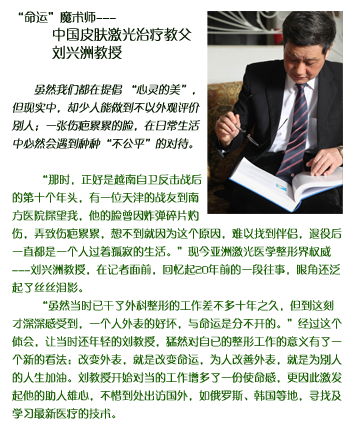
<style>
.page{position:relative;width:357px;height:447px;background:#ffffff}
.page>*{position:absolute;margin:0}
.t1{font:11px/18px "FZZQJW--GB1-0";color:#196003}
.t2{font:12px/18px "FZZQJW--GB1-0";color:#061b00}
.t3{font:14px/18px "FZZQJW--GB1-0";color:#061b00}
.t4{font:11px/18px "FZZQJW--GB1-0";color:#061b00;font-style:italic}
</style>
<div class="page">
<p class="t1" style="left:11px;top:11px;width:331px;height:408px"><span class="t2">“命运”魔术师---<br></span><span class="t3">          中国皮肤激光治疗教父<br>          刘兴洲教授<br><br></span><span class="t4">       虽然我们都在提倡 “心灵的美”，<br>但现实中，却少人能做到不以外观评价<br>别人；一张伤疤累累的脸，在日常生活<br>中必然会遇到种种“不公平”的对待。<br><br></span>        “那时，正好是越南自卫反击战后<br>的第十个年头，有一位天津的战友到南<br>方医院探望我，他的脸曾因炸弹碎片灼<br>伤，弄致伤疤累累，想不到就因为这个原因，难以找到伴侣，退役后一直都是一个人过着孤寂的生活。”现今亚洲激光医学整形界权威---刘兴洲教授，在记者面前，回忆起20年前的一段往事，眼角还泛起了丝丝泪影。<br>        “虽然当时已干了外科整形的工作差不多十年之久，但到这刻才深深感受到，一个人外表的好坏，与命运是分不开的。”经过这个体会，让当时还年轻的刘教授，猛然对自已的整形工作的意义有了一个新的看法：改变外表，就是改变命运，为人改善外表，就是为别人的人生加油。刘教授开始对当的工作增多了一份使命感，更因此激发起他的助人雄心，不惜到处出访国外，如俄罗斯、韩国等地，寻找及学习最新医疗的技术。</p>
</div>
